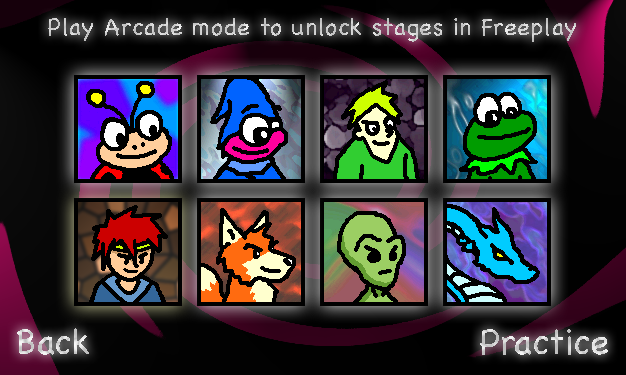
<style>
.page{position:relative;width:626px;height:375px}
.page>*{position:absolute;margin:0}
.t1{font:24px "Chalkboard";color:#cecece}
.t2{font:36px "Chalkboard";color:#d5d5d5}
.t3{font:36px "Chalkboard";color:#d3d3d3}
</style>
<div class="page">
<p class="t1" style="left:48px;top:18px;width:528px;height:24px">Play Arcade mode to unlock stages in Freeplay</p>
<p class="t2" style="left:17px;top:328px;width:72px;height:27px">Back</p>
<p class="t3" style="left:480px;top:329px;width:128px;height:26px">Practice</p>
</div>
